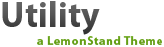
<style>
.page{position:relative;width:164px;height:47px;background:#ffffff}
.page>*{position:absolute;margin:0}
.t1{font:12px/18px "MyriadPro-Bold";letter-spacing:0.05em;color:#555551}
.t2{font:36px/14px "MyriadPro-Bold";color:#555551}
</style>
<div class="page">
<p class="t1" style="left:2px;top:1px;width:160px;height:44px;text-align:right"><span class="t2">Utility<br></span>a LemonStand Theme</p>
</div>
